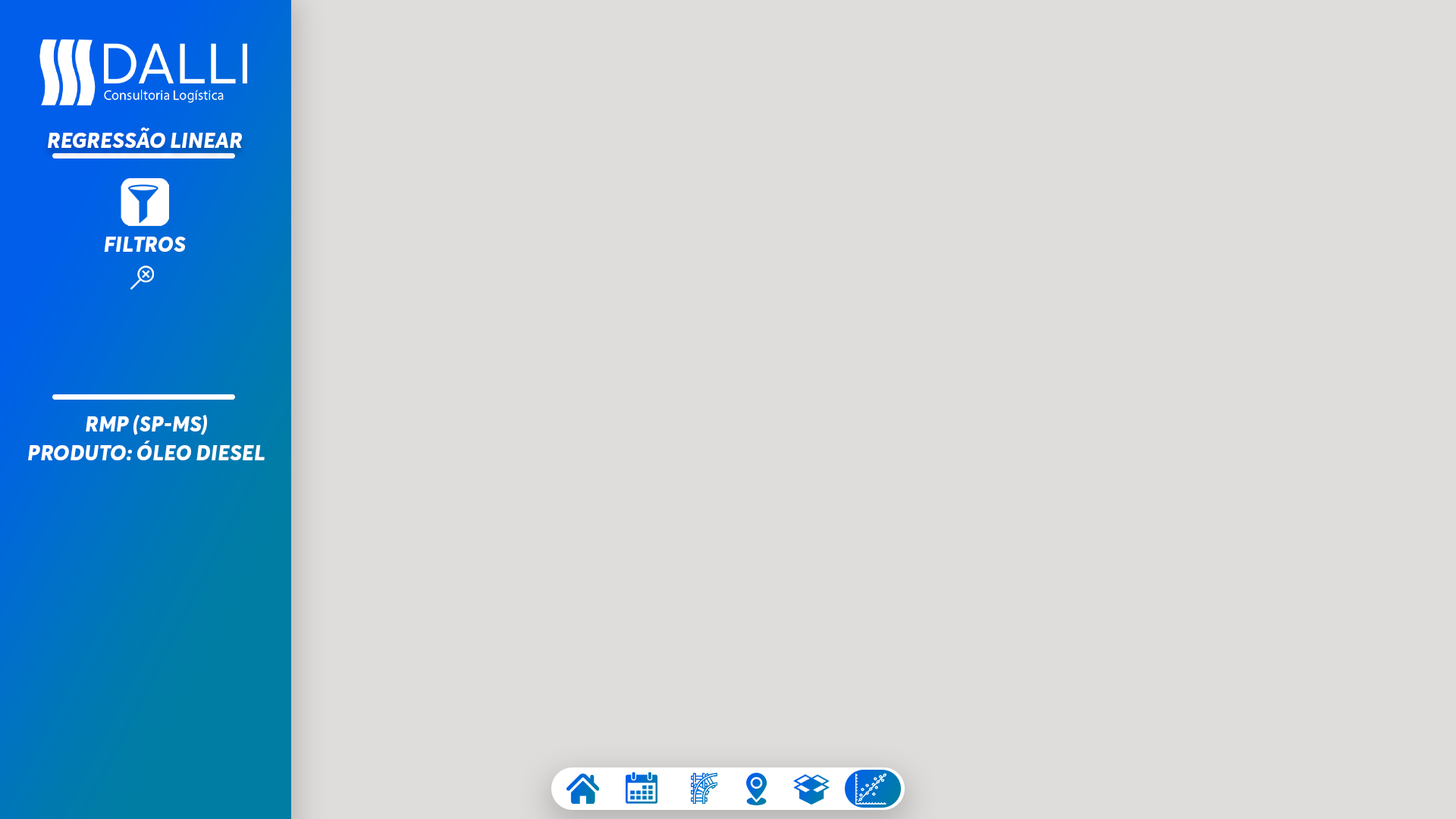
<style>
.page{position:relative;width:1456px;height:819px;background:#dfdddc}
.page>*{position:absolute;margin:0}
.t1{font:22.1px "AvertaDemoPE-ExtraboldItalic";color:#ffffff;text-transform:uppercase}
.t2{font:22.1px/28.4px "AvertaDemoPE-ExtraboldItalic";color:#ffffff;text-transform:uppercase}
</style>
<div class="page">
<p class="t1" style="left:48px;top:127px;width:194px;height:21px">regressão linear</p>
<p class="t1" style="left:104px;top:237px;width:82px;height:15px">filtros</p>
<p class="t2" style="left:28px;top:415px;width:237px;height:45px;text-align:center">rmp (sp-ms)<br>produto: óleo diesel</p>
</div>
